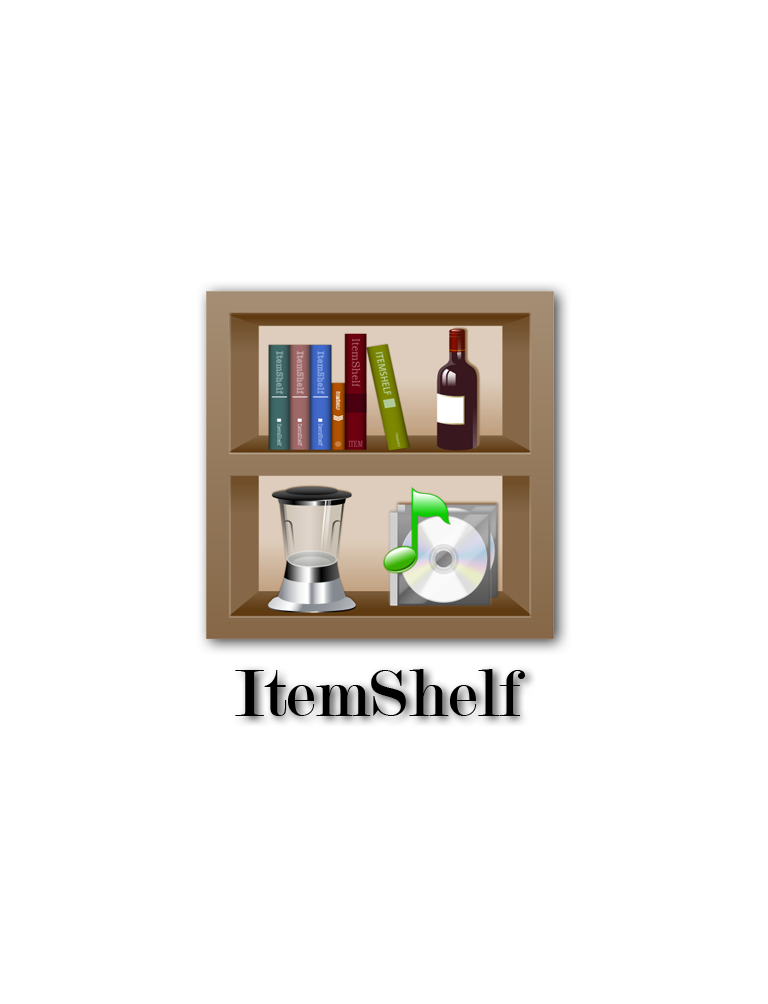
<style>
.page{position:relative;width:768px;height:1004px;background:#ffffff}
.page>*{position:absolute;margin:0}
.t1{font:72px "Modern-Regular";color:#000000}
</style>
<div class="page">
<p class="t1" style="left:235px;top:669px;width:290px;height:47px">ItemShelf</p>
</div>
